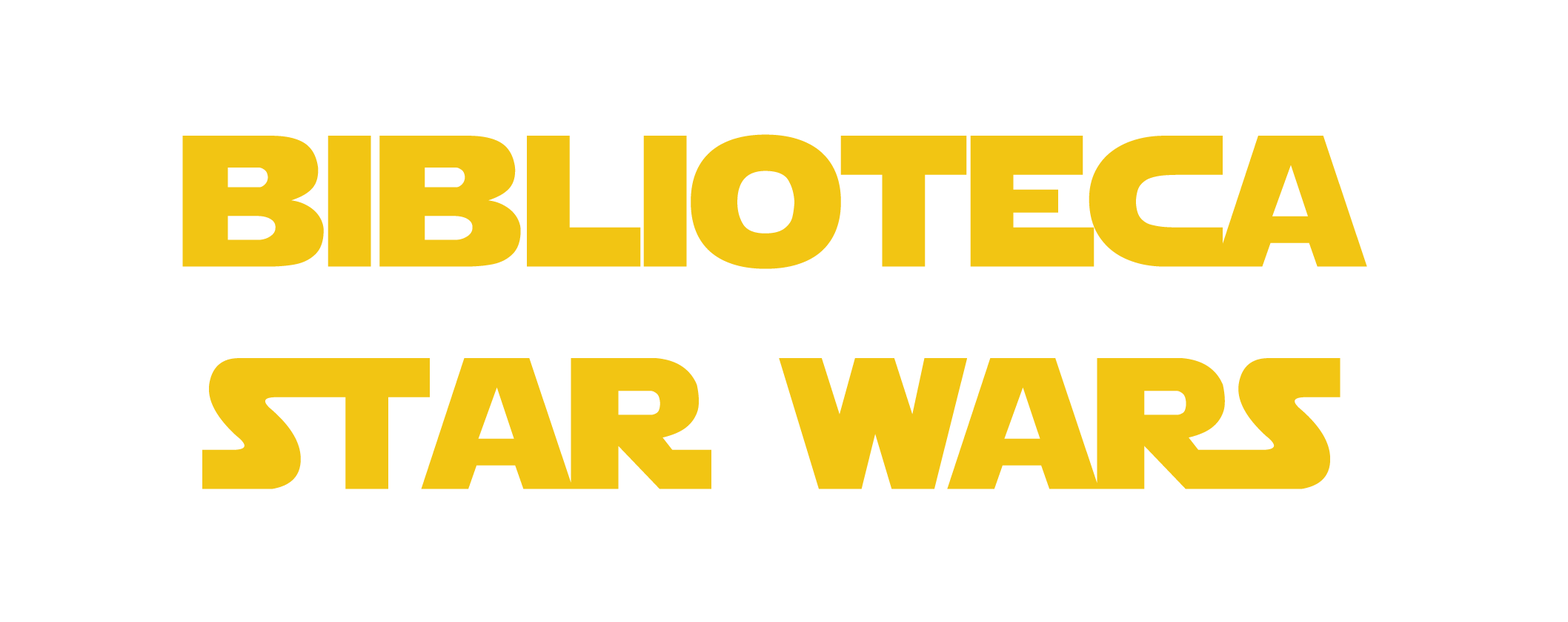
<style>
.page{position:relative;width:1568px;height:622px;background:#ffffff}
.page>*{position:absolute;margin:0}
.t1{font:185.3px "StarJediLogoDoubleLine1";color:#f2c513}
</style>
<div class="page">
<p class="t1" style="left:182px;top:134px;width:1185px;height:355px;text-align:center">biblioteca<br>star wars</p>
</div>
